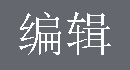
<style>
.page{position:relative;width:130px;height:70px;background:#65676e}
.page>*{position:absolute;margin:0}
.t1{font:48px "NSimSun";color:#ffffff}
</style>
<div class="page">
<p class="t1" style="left:19px;top:12px;width:92px;height:43px">编辑</p>
</div>
